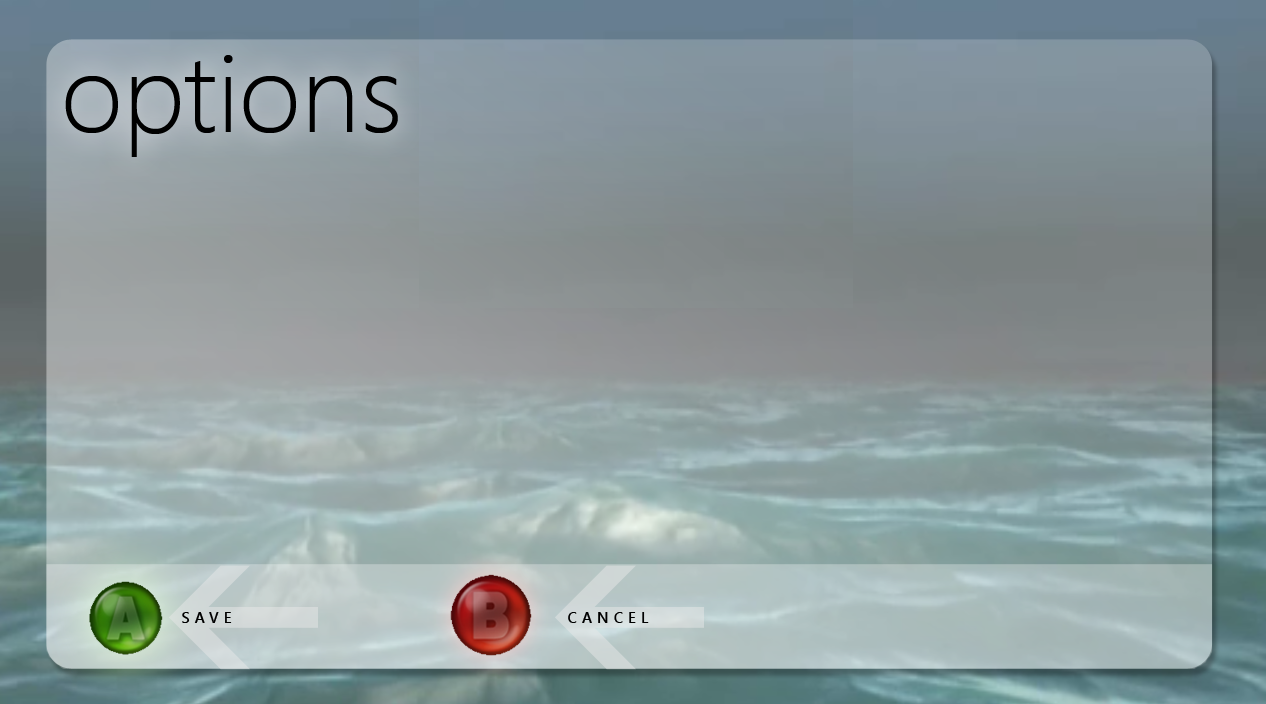
<style>
.page{position:relative;width:1266px;height:704px}
.page>*{position:absolute;margin:0}
.t1{font:110px "SegoeUI-Light";color:#000000}
.t2{font:15px "SegoeUI-SemiBold";letter-spacing:0.34em;color:#000000}
</style>
<div class="page">
<p class="t1" style="left:65px;top:55px;width:333px;height:102px">options</p>
<p class="t2" style="left:182px;top:612px;width:50px;height:11px">SAVE</p>
<p class="t2" style="left:568px;top:612px;width:81px;height:11px">CANCEL</p>
</div>
